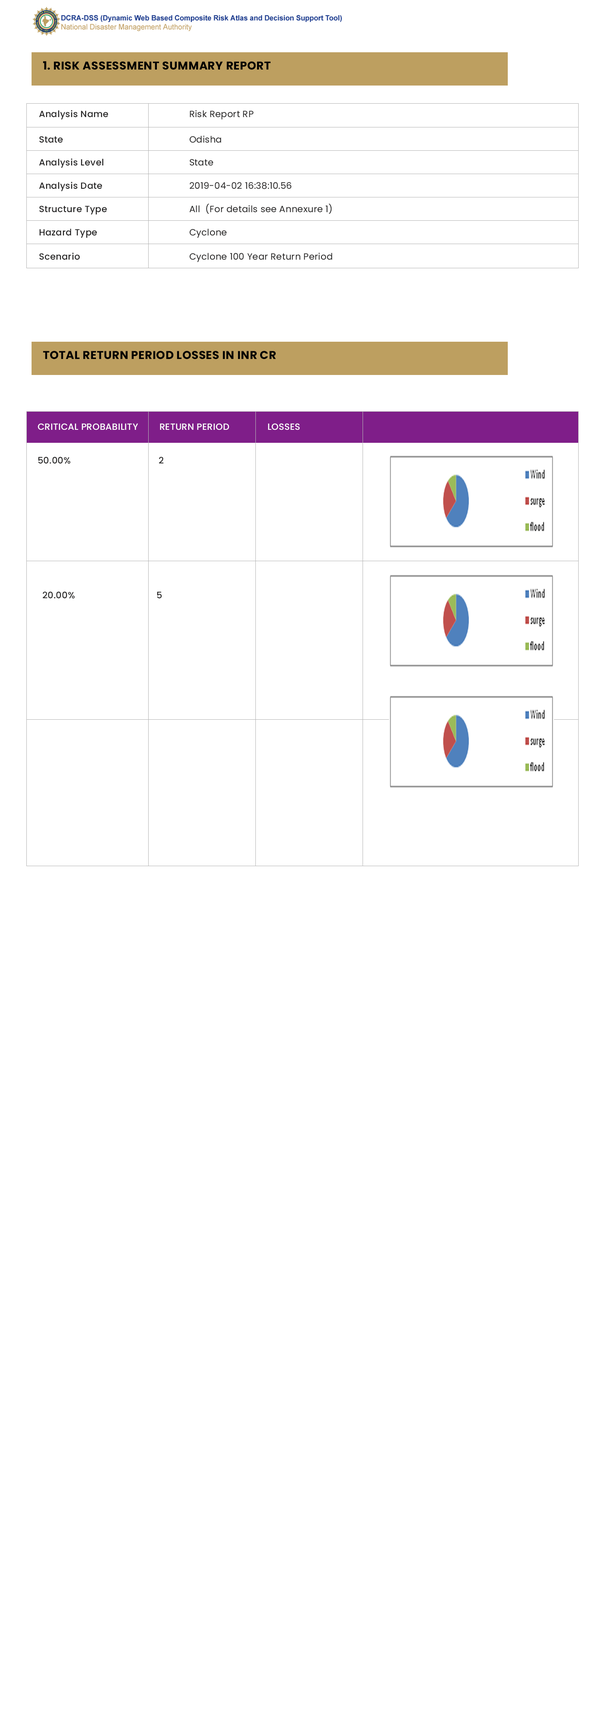
<style>
.page{position:relative;width:605px;height:1728px;background:#ffffff}
.page>*{position:absolute;margin:0}
.t1{font:11.4px "Poppins-Bold";letter-spacing:0.02em;color:#000000;text-transform:uppercase}
.t2{font:9px "Poppins-Medium";letter-spacing:0.02em;color:#212020}
.t3{font:9px "Poppins-Regular";letter-spacing:0.02em;color:#212020}
.t4{font:9px "Poppins-Medium";letter-spacing:0.02em;color:#ffffff;text-transform:uppercase}
.t5{font:9px "Poppins-Medium";letter-spacing:0.02em;color:#212020;text-transform:uppercase}
</style>
<div class="page">
<p class="t1" style="left:43px;top:61px;width:227px;height:9px">1. Risk Assessment Summary Report</p>
<p class="t2" style="left:39px;top:110px;width:69px;height:10px">Analysis Name</p>
<p class="t3" style="left:190px;top:110px;width:64px;height:10px">Risk Report RP</p>
<p class="t2" style="left:39px;top:136px;width:24px;height:7px">State</p>
<p class="t3" style="left:189px;top:136px;width:32px;height:7px">Odisha</p>
<p class="t2" style="left:39px;top:159px;width:64px;height:9px">Analysis Level</p>
<p class="t3" style="left:190px;top:159px;width:23px;height:7px">State</p>
<p class="t2" style="left:39px;top:182px;width:63px;height:9px">Analysis Date</p>
<p class="t3" style="left:190px;top:182px;width:102px;height:7px">2019-04-02 16:38:10.56</p>
<p class="t2" style="left:39px;top:206px;width:68px;height:9px">Structure Type</p>
<p class="t3" style="left:189px;top:203px;width:143px;height:11px">All  (For details see Annexure 1)</p>
<p class="t2" style="left:39px;top:229px;width:58px;height:9px">Hazard Type</p>
<p class="t3" style="left:189px;top:229px;width:38px;height:9px">Cyclone</p>
<p class="t2" style="left:39px;top:253px;width:41px;height:7px">Scenario</p>
<p class="t3" style="left:189px;top:253px;width:143px;height:9px">Cyclone 100 Year Return Period</p>
<p class="t1" style="left:43px;top:351px;width:233px;height:8px">Total Return Period Losses in INR Cr</p>
<p class="t4" style="left:38px;top:423px;width:100px;height:7px">Critical Probability</p>
<p class="t4" style="left:160px;top:423px;width:69px;height:7px">Return Period</p>
<p class="t4" style="left:268px;top:423px;width:32px;height:7px">losses</p>
<p class="t5" style="left:38px;top:457px;width:32px;height:7px">50.00%</p>
<p class="t5" style="left:159px;top:457px;width:5px;height:7px">2</p>
<p class="t5" style="left:43px;top:591px;width:32px;height:8px">20.00%</p>
<p class="t5" style="left:157px;top:591px;width:5px;height:7px">5</p>
</div>
